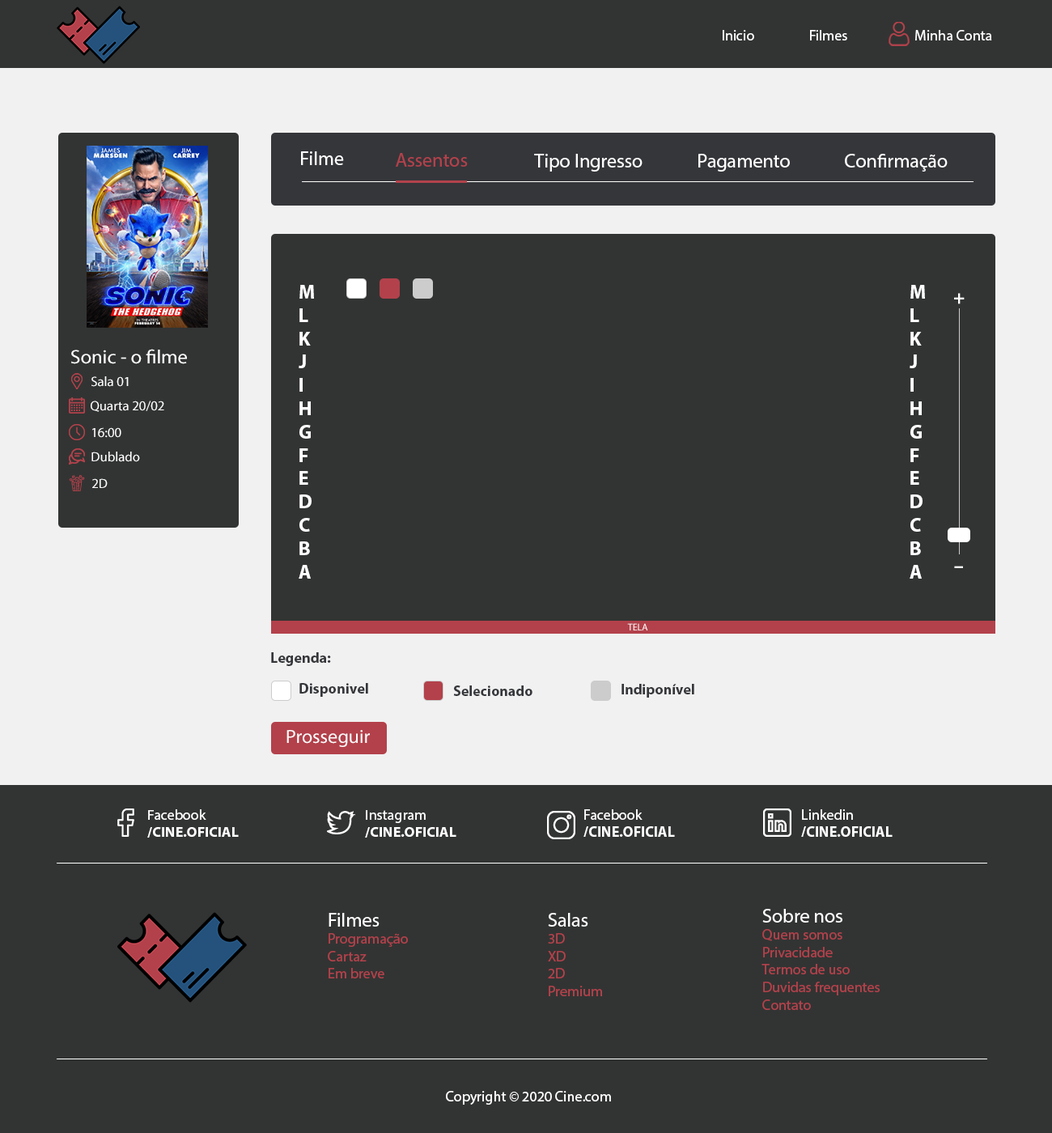
<style>
.page{position:relative;width:1052px;height:1133px;background:#323433}
.page>*{position:absolute;margin:0}
.t1{font:14.6px "MyriadPro-Regular";color:#ffffff}
.t2{font:19.4px "MyriadPro-Regular";color:#ffffff}
.t3{font:19.4px "MyriadPro-Regular";color:#b3414b}
.t4{font:19.4px "MyriadPro-Regular";color:#fffefe}
.t5{font:19.4px "MyriadPro-Bold";color:#ffffff}
.t6{font:13.6px "MyriadPro-Regular";color:#ffffff}
.t7{font:9.7px "MyriadPro-Regular";color:#ffffff}
.t8{font:14.6px "MyriadPro-Bold";color:#35363a}
.t9{font:14.4px "MyriadPro-Bold";color:#ffffff}
.t10{font:14.4px "MyriadPro-Regular";color:#ffffff}
.t11{font:14.6px "MyriadPro-Bold";color:#ffffff}
.t12{font:14.6px "MyriadPro-Regular";color:#b3414b}
</style>
<div class="page">
<p class="t1" style="left:723px;top:30px;width:269px;height:10px">Inicio  Filmes        Minha Conta</p>
<p class="t2" style="left:301px;top:151px;width:43px;height:14px">Filme</p>
<p class="t3" style="left:396px;top:153px;width:72px;height:14px">Assentos</p>
<p class="t2" style="left:534px;top:154px;width:109px;height:18px">Tipo Ingresso</p>
<p class="t4" style="left:699px;top:154px;width:91px;height:18px">Pagamento</p>
<p class="t2" style="left:845px;top:154px;width:103px;height:18px">Confirmação</p>
<p class="t5" style="left:299px;top:285px;width:15px;height:294px">M<br>L<br>K<br>J<br>I<br>H<br>G<br>F<br>E<br>D<br>C<br>B<br>A</p>
<p class="t5" style="left:910px;top:285px;width:15px;height:294px">M<br>L<br>K<br>J<br>I<br>H<br>G<br>F<br>E<br>D<br>C<br>B<br>A</p>
<p class="t5" style="left:954px;top:293px;width:11px;height:11px">+</p>
<p class="t2" style="left:71px;top:349px;width:116px;height:15px">Sonic - o filme</p>
<p class="t6" style="left:91px;top:376px;width:38px;height:11px">Sala 01</p>
<p class="t6" style="left:91px;top:401px;width:73px;height:11px">Quarta 20/02</p>
<p class="t6" style="left:92px;top:427px;width:29px;height:11px">16:00</p>
<p class="t6" style="left:91px;top:452px;width:49px;height:10px">Dublado</p>
<p class="t6" style="left:92px;top:478px;width:16px;height:10px">2D</p>
<p class="t5" style="left:954px;top:566px;width:9px;height:2px">-</p>
<p class="t7" style="left:627px;top:623px;width:21px;height:8px">TELA</p>
<p class="t8" style="left:271px;top:652px;width:60px;height:14px">Legenda:</p>
<p class="t8" style="left:299px;top:683px;width:69px;height:14px">Disponivel</p>
<p class="t8" style="left:453px;top:686px;width:80px;height:10px">Selecionado</p>
<p class="t8" style="left:622px;top:684px;width:72px;height:14px">Indiponível</p>
<p class="t2" style="left:287px;top:730px;width:83px;height:17px">Prosseguir</p>
<p class="t9" style="left:147px;top:809px;width:92px;height:29px"><span class="t10">Facebook<br></span>/CINE.OFICIAL</p>
<p class="t11" style="left:584px;top:809px;width:91px;height:28px"><span class="t1">Facebook<br></span>/CINE.OFICIAL</p>
<p class="t11" style="left:801px;top:809px;width:92px;height:28px"><span class="t1">Linkedin<br></span>/CINE.OFICIAL</p>
<p class="t9" style="left:365px;top:810px;width:92px;height:28px"><span class="t10">Instagram<br></span>/CINE.OFICIAL</p>
<p class="t12" style="left:328px;top:913px;width:80px;height:66px"><span class="t2">Filmes<br></span>Programação<br>Cartaz<br>Em breve</p>
<p class="t12" style="left:548px;top:913px;width:54px;height:83px"><span class="t2">Salas<br></span>3D<br>XD<br>2D<br>Premium</p>
<p class="t12" style="left:762px;top:909px;width:118px;height:101px"><span class="t2">Sobre nos<br></span>Quem somos<br>Privacidade<br>Termos de uso<br>Duvidas frequentes<br>Contato</p>
<p class="t1" style="left:446px;top:1091px;width:165px;height:14px">Copyright © 2020 Cine.com</p>
</div>
